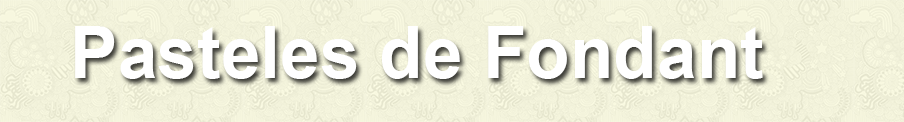
<style>
.page{position:relative;width:904px;height:122px}
.page>*{position:absolute;margin:0}
.t1{font:71.9px "Arial-BoldMT";color:#ffffff}
</style>
<div class="page">
<p class="t1" style="left:75px;top:26px;width:688px;height:53px">Pasteles de Fondant</p>
</div>
